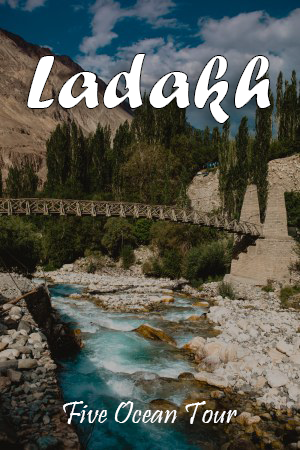
<style>
.page{position:relative;width:300px;height:450px}
.page>*{position:absolute;margin:0}
.t1{font:80px "ForteMT";letter-spacing:0.005em;color:#ffffff}
.t2{font:32px "Pristina-Regular";letter-spacing:0.005em;color:#ffffff}
</style>
<div class="page">
<p class="t1" style="left:26px;top:53px;width:246px;height:71px">Ladakh</p>
<p class="t2" style="left:63px;top:401px;width:174px;height:23px">Five Ocean Tour</p>
</div>
